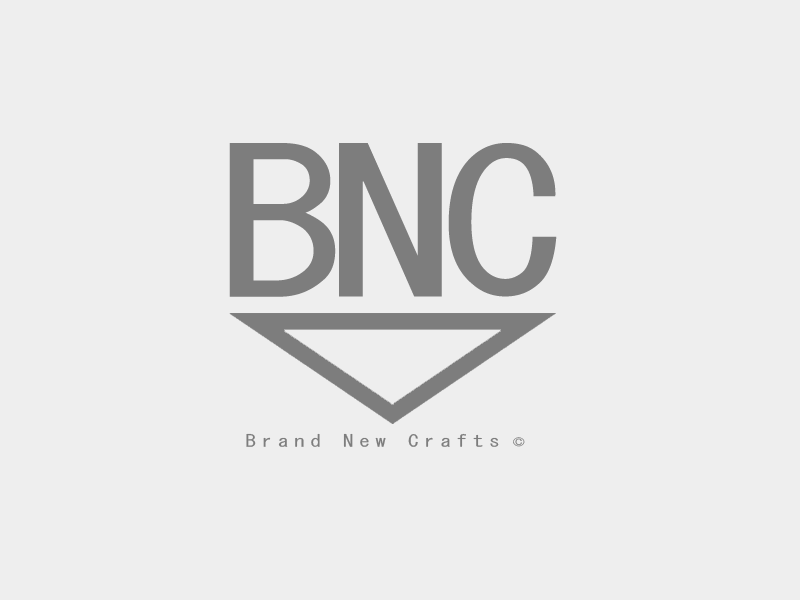
<style>
.page{position:relative;width:800px;height:600px;background:#eeeeee}
.page>*{position:absolute;margin:0}
.t1{font:200px "MS-Gothic";letter-spacing:-0.06em;color:#7d7d7d;scale:1.25 1}
.t2{font:16.7px "MS-Gothic";letter-spacing:0.28em;color:#7d7d7d;scale:1.25 1}
.t3{font:20px "MS-Gothic";letter-spacing:0.3em;color:#7d7d7d;scale:1.25 1}
</style>
<div class="page">
<p class="t1" style="left:229px;top:143px;width:328px;height:154px">BNC</p>
<p class="t2" style="left:246px;top:433px;width:253px;height:14px">Brand New Crafts</p>
<p class="t3" style="left:513px;top:437px;width:12px;height:10px">©</p>
</div>
